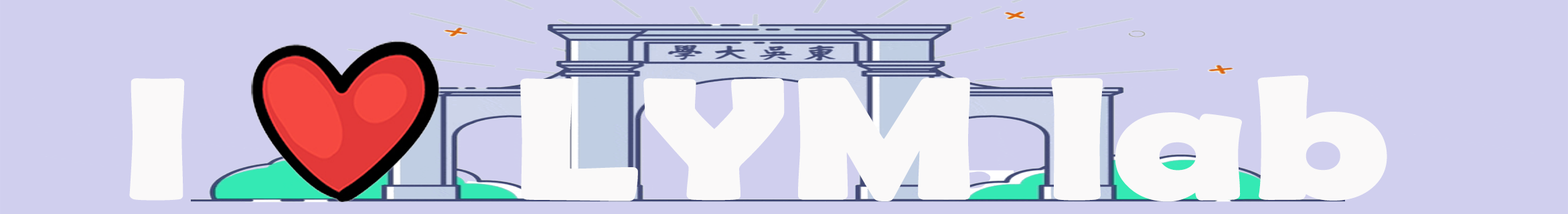
<style>
.page{position:relative;width:1568px;height:214px;background:#d0cfee}
.page>*{position:absolute;margin:0}
.t1{font:170.3px "BerlinSansFBDemi-Bold";color:#faf9f9;font-weight:bold;scale:1.34 1}
</style>
<div class="page">
<p class="t1" style="left:129px;top:75px;width:1258px;height:127px">I     LYM lab</p>
</div>
